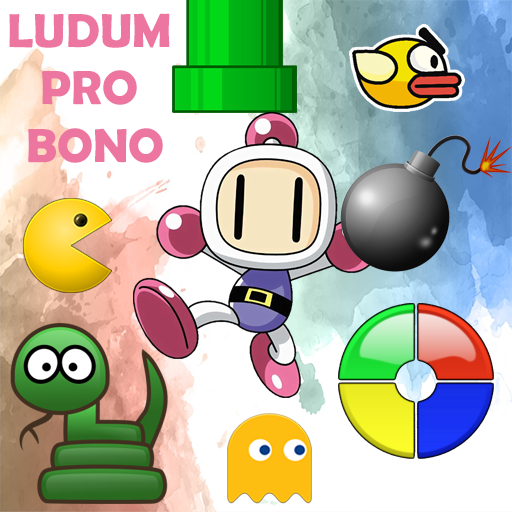
<style>
.page{position:relative;width:512px;height:512px;background:#ffffff}
.page>*{position:absolute;margin:0}
.t1{font:48px "BerlinSansFBDemi-Bold";color:#ed75a1}
</style>
<div class="page">
<p class="t1" style="left:9px;top:13px;width:161px;height:150px;text-align:center">LUDUM <br>PRO <br>BONO</p>
</div>
